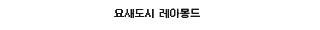
<style>
.page{position:relative;width:320px;height:30px;background:#ffffff}
.page>*{position:absolute;margin:0}
.t1{font:10px "Galmuri9-Regular";color:#191919;font-weight:bold}
</style>
<div class="page">
<p class="t1" style="left:114px;top:8px;width:86px;height:10px">요새도시 레아몽드</p>
</div>
